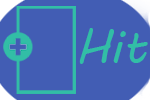
<style>
.page{position:relative;width:150px;height:100px;background:#425db4}
.page>*{position:absolute;margin:0}
.t1{font:46.5px "MVBoli";color:#32bea6}
</style>
<div class="page">
<p class="t1" style="left:79px;top:28px;width:69px;height:36px">Hit</p>
</div>
